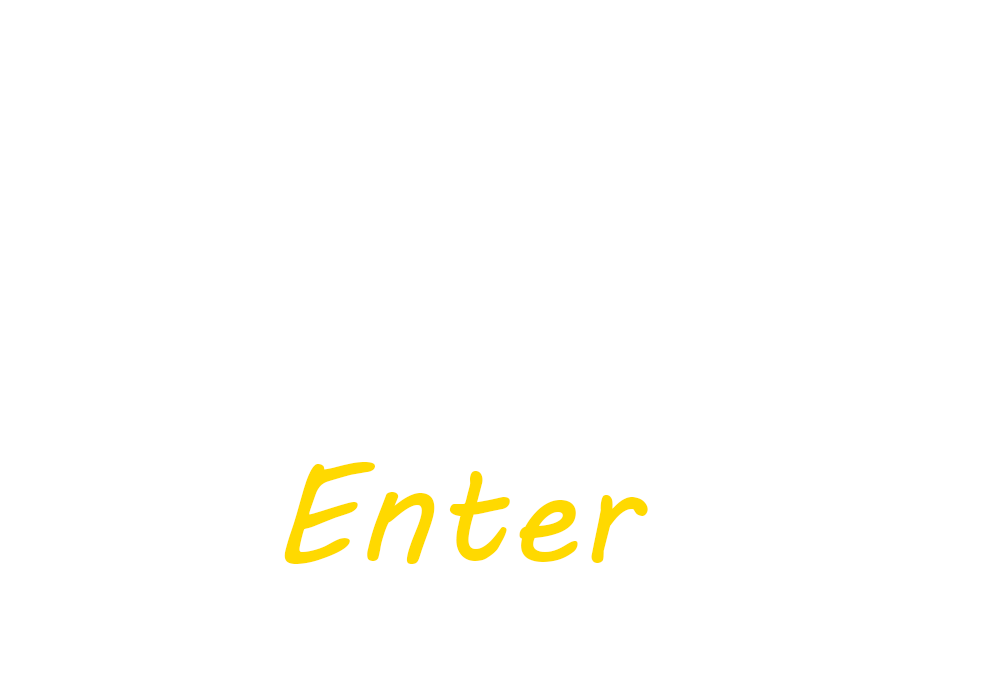
<style>
.page{position:relative;width:1000px;height:700px;background:#ffffff}
.page>*{position:absolute;margin:0}
.t1{font:140.7px "MVBoli";color:#ffd900}
</style>
<div class="page">
<p class="t1" style="left:284px;top:462px;width:364px;height:102px">Enter</p>
</div>
